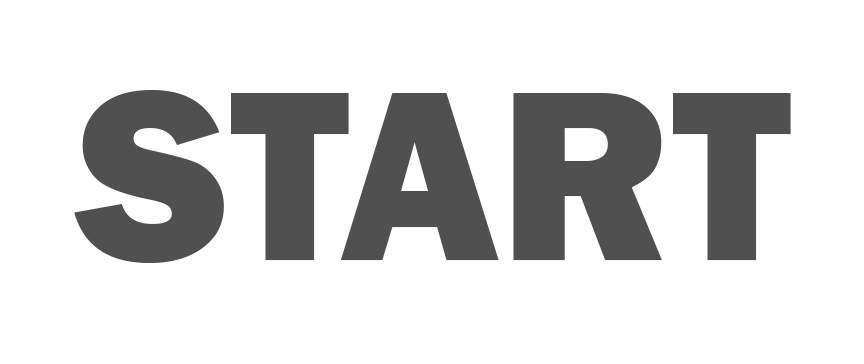
<style>
.page{position:relative;width:864px;height:364px;background:#ffffff}
.page>*{position:absolute;margin:0}
.t1{font:250px "FranklinGothic-Heavy";color:#515050}
</style>
<div class="page">
<p class="t1" style="left:74px;top:90px;width:717px;height:173px">START</p>
</div>
